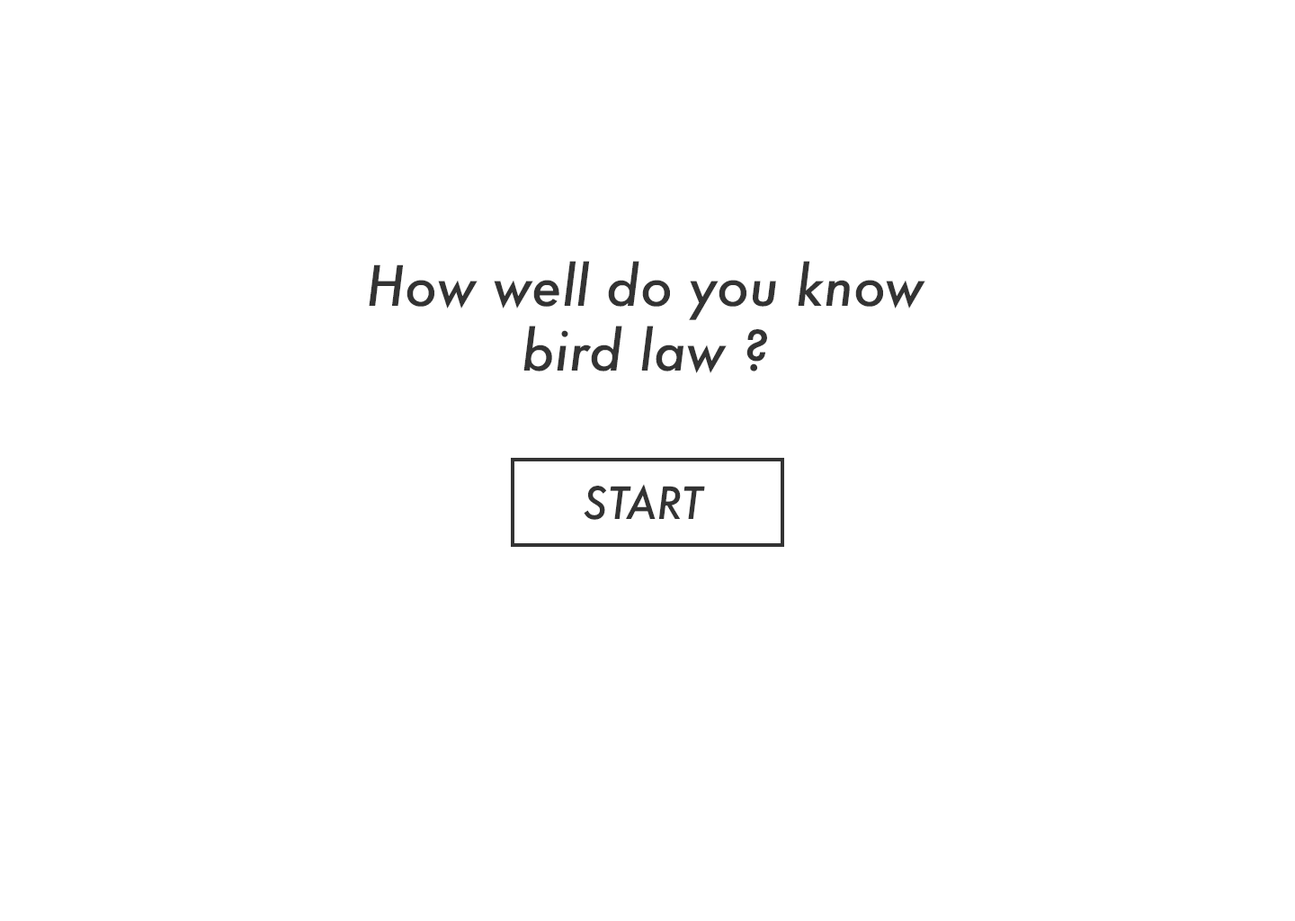
<style>
.page{position:relative;width:1295px;height:921px;background:#ffffff}
.page>*{position:absolute;margin:0}
.t1{font:54px "Futura-MediumItalic";color:#333333}
.t2{font:43.2px "Futura-MediumItalic";color:#333333}
</style>
<div class="page">
<p class="t1" style="left:369px;top:261px;width:556px;height:112px;text-align:center">How well do you know<br>bird law ?</p>
<p class="t2" style="left:584px;top:484px;width:121px;height:36px">START</p>
</div>
